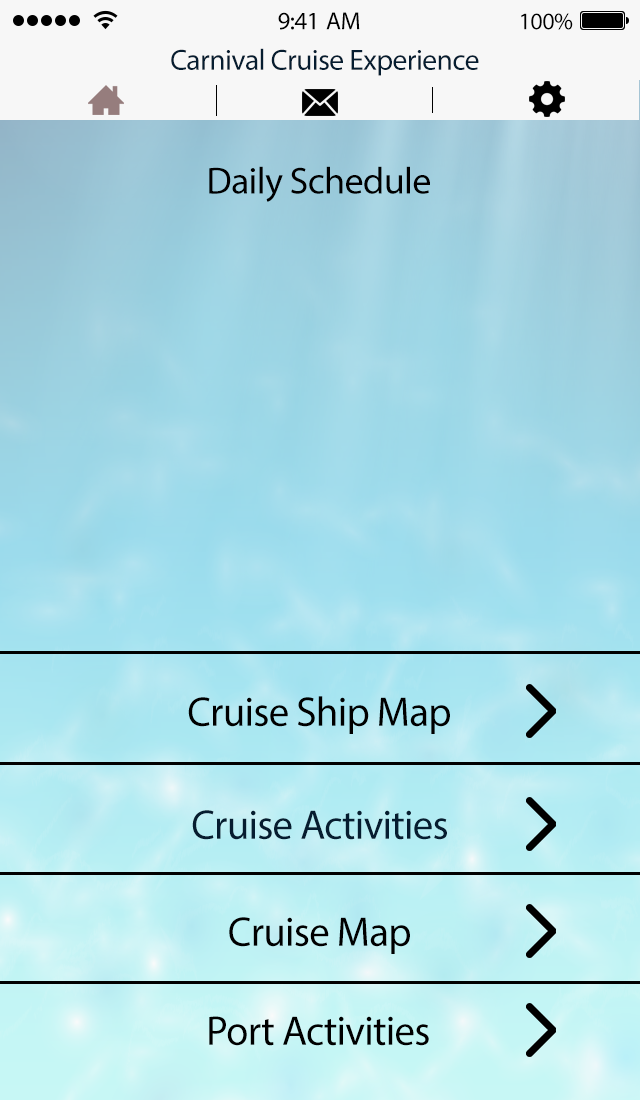
<style>
.page{position:relative;width:640px;height:1100px}
.page>*{position:absolute;margin:0}
.t1{font:25px "MyriadPro-Regular";letter-spacing:-0.02em;color:#000000}
.t2{font:24px "MyriadPro-Regular";letter-spacing:-0.02em;color:#000000}
.t3{font:29.4px "MyriadPro-Regular";letter-spacing:-0.02em;color:#061d30}
.t4{font:37.7px "MyriadPro-Regular";letter-spacing:-0.02em;color:#000000}
.t5{font:41.4px "MyriadPro-Regular";letter-spacing:-0.02em;color:#000000}
.t6{font:41.4px "MyriadPro-Regular";letter-spacing:-0.02em;color:#061d30}
</style>
<div class="page">
<p class="t1" style="left:278px;top:12px;width:82px;height:18px">9:41 AM</p>
<p class="t2" style="left:521px;top:13px;width:52px;height:17px">100%</p>
<p class="t3" style="left:171px;top:48px;width:308px;height:28px">Carnival Cruise Experience</p>
<p class="t4" style="left:209px;top:166px;width:221px;height:36px">Daily Schedule</p>
<p class="t5" style="left:188px;top:696px;width:262px;height:38px">Cruise Ship Map</p>
<p class="t6" style="left:192px;top:810px;width:255px;height:30px">Cruise Activities</p>
<p class="t5" style="left:229px;top:917px;width:181px;height:37px">Cruise Map</p>
<p class="t5" style="left:209px;top:1016px;width:220px;height:30px">Port Activities</p>
</div>
